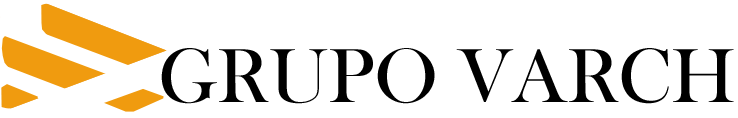
<style>
.page{position:relative;width:738px;height:118px;background:#ffffff}
.page>*{position:absolute;margin:0}
.t1{font:79.2px "BaskOldFace";color:#000000}
</style>
<div class="page">
<p class="t1" style="left:161px;top:48px;width:573px;height:56px">GRUPO VARCH</p>
</div>
